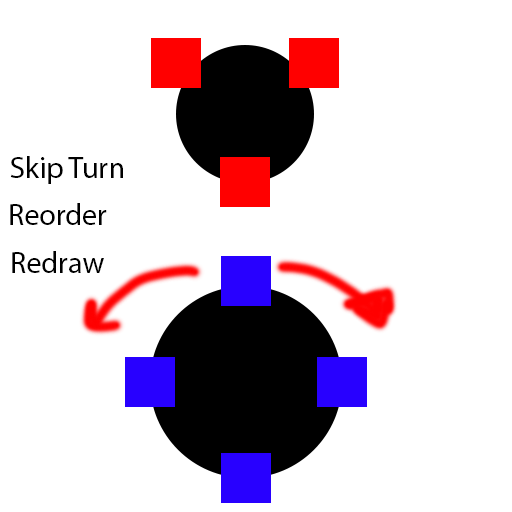
<style>
.page{position:relative;width:512px;height:512px;background:#ffffff}
.page>*{position:absolute;margin:0}
.t1{font:30px "MyriadPro-Regular";color:#000000}
</style>
<div class="page">
<p class="t1" style="left:10px;top:156px;width:113px;height:28px">Skip Turn</p>
<p class="t1" style="left:10px;top:203px;width:97px;height:22px">Reorder</p>
<p class="t1" style="left:12px;top:251px;width:92px;height:22px">Redraw</p>
</div>
